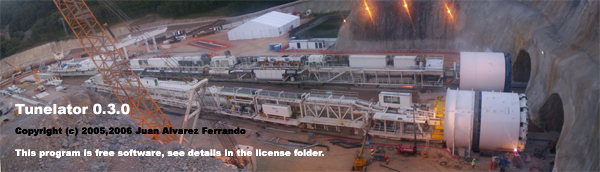
<style>
.page{position:relative;width:600px;height:172px}
.page>*{position:absolute;margin:0}
.t1{font:9px "Arial-Black";color:#ffffff}
.t2{font:14px "Arial-Black";color:#ffffff}
.t3{font:9px "Arial-Black";color:#000000}
</style>
<div class="page">
<p class="t1" style="left:15px;top:103px;width:309px;height:55px"><span class="t2">Tunelator 0.3.0<br><br></span><span class="t3">Copyright (c) 2005,2006 Juan Alvarez Ferrando<br><br></span>This program is free software, see details in the license folder.</p>
</div>
